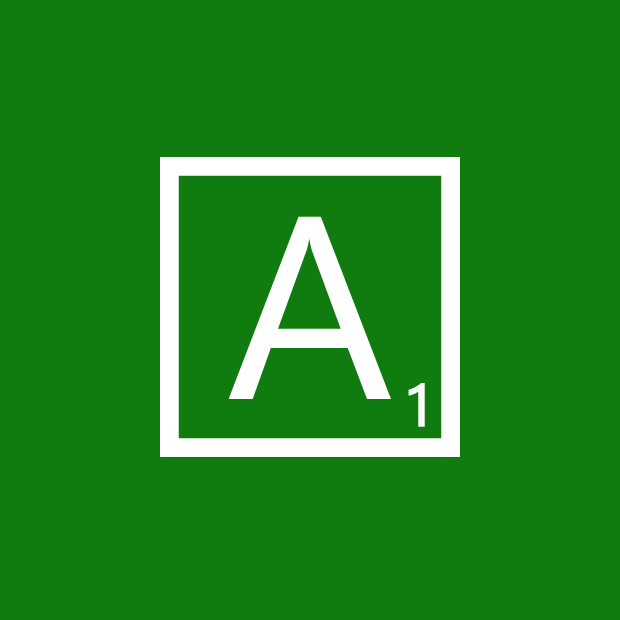
<style>
.page{position:relative;width:620px;height:620px;background:#107c10}
.page>*{position:absolute;margin:0}
.t1{font:260px "SegoeWP";color:#ffffff}
.t2{font:60px "SegoeWP";color:#ffffff;font-weight:bold}
</style>
<div class="page">
<p class="t1" style="left:228px;top:216px;width:163px;height:183px">A</p>
<p class="t2" style="left:408px;top:383px;width:17px;height:44px">1</p>
</div>
